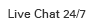
<style>
.page{position:relative;width:100px;height:25px;background:#ffffff}
.page>*{position:absolute;margin:0}
.t1{font:12px "Univers";color:#333333}
</style>
<div class="page">
<p class="t1" style="left:8px;top:9px;width:78px;height:9px">Live Chat 24/7</p>
</div>
